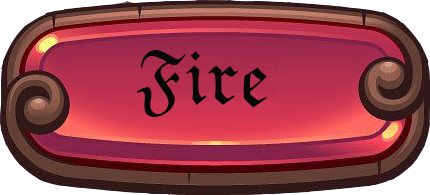
<style>
.page{position:relative;width:430px;height:195px}
.page>*{position:absolute;margin:0}
.t1{font:80px "EuclidFraktur";color:#080808}
</style>
<div class="page">
<p class="t1" style="left:136px;top:50px;width:131px;height:67px">Fire</p>
</div>
